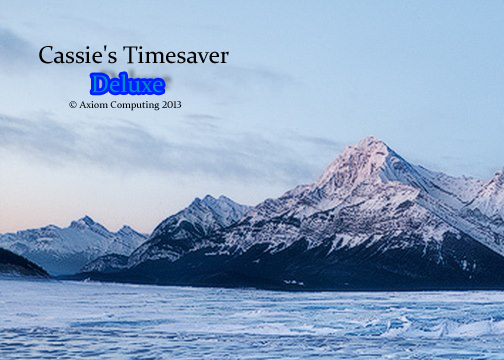
<style>
.page{position:relative;width:504px;height:360px}
.page>*{position:absolute;margin:0}
.t1{font:24px "Constantia";color:#000000}
.t2{font:24px "Constantia";color:#008dc8}
.t3{font:10px "Constantia";color:#000000}
</style>
<div class="page">
<p class="t1" style="left:39px;top:45px;width:190px;height:19px">Cassie's Timesaver</p>
<p class="t2" style="left:92px;top:74px;width:71px;height:19px">Deluxe</p>
<p class="t3" style="left:69px;top:101px;width:113px;height:10px">© Axiom Computing 2013</p>
</div>
